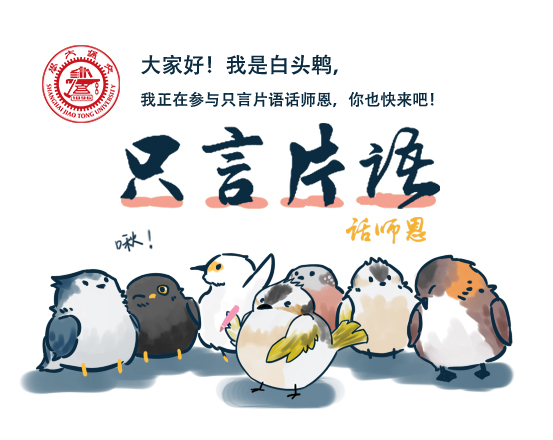
<style>
.page{position:relative;width:553px;height:440px;background:#ffffff}
.page>*{position:absolute;margin:0}
.t1{font:16px "AdobeHeitiStd-Regular";color:#0b2b40}
.t2{font:21.3px "AdobeHeitiStd-Regular";color:#0b2b40}
</style>
<div class="page">
<p class="t1" style="left:141px;top:54px;width:293px;height:54px"><span class="t2">大家好！我是白头鹎，<br></span>我正在参与只言片语话师恩，你也快来吧！</p>
</div>
